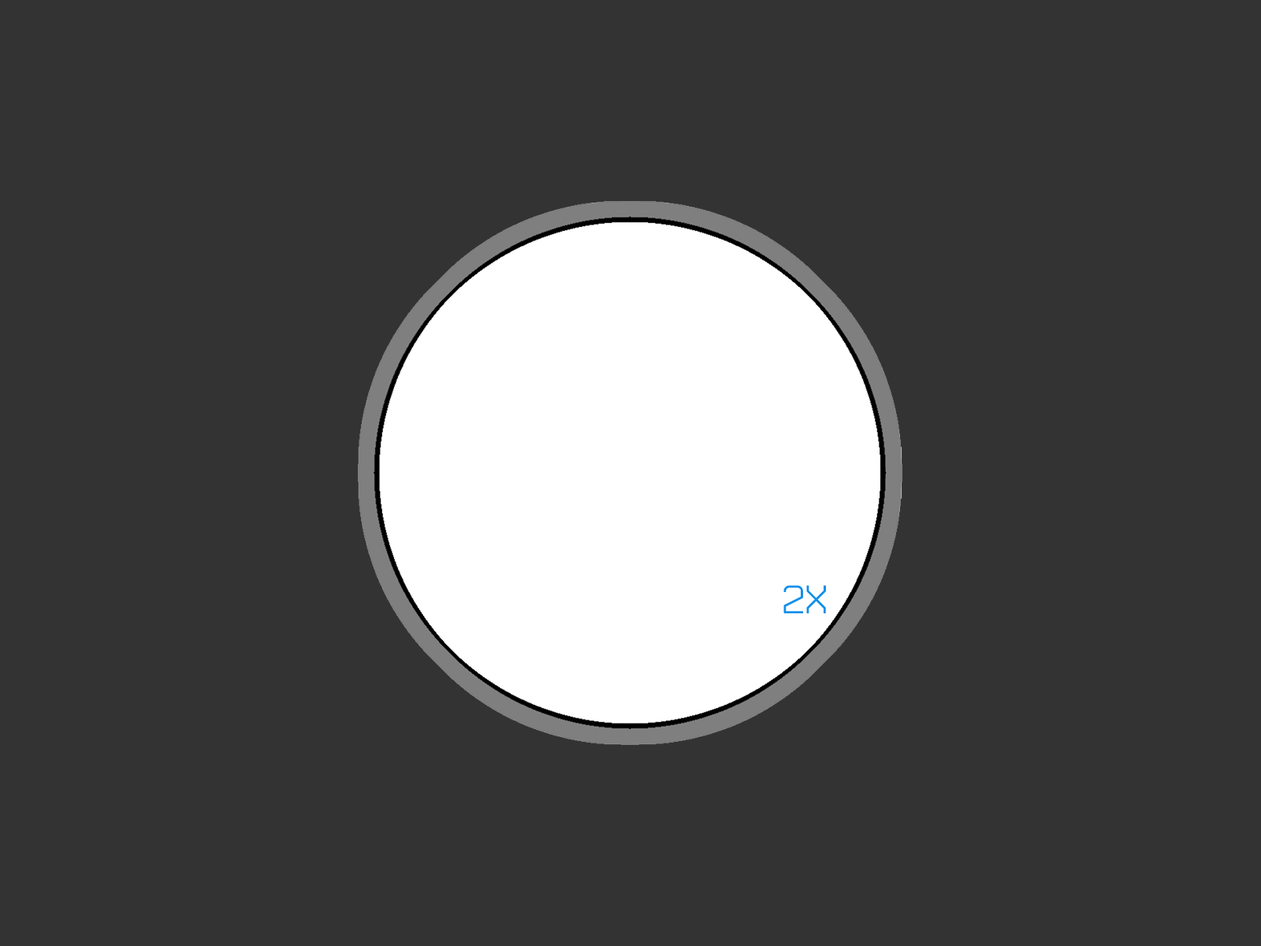
<style>
.page{position:relative;width:1261px;height:946px;background:#333333}
.page>*{position:absolute;margin:0}
.t1{font:39.6px "Arame-Thin";color:#108fea}
</style>
<div class="page">
<p class="t1" style="left:783px;top:585px;width:43px;height:28px">2x</p>
</div>
